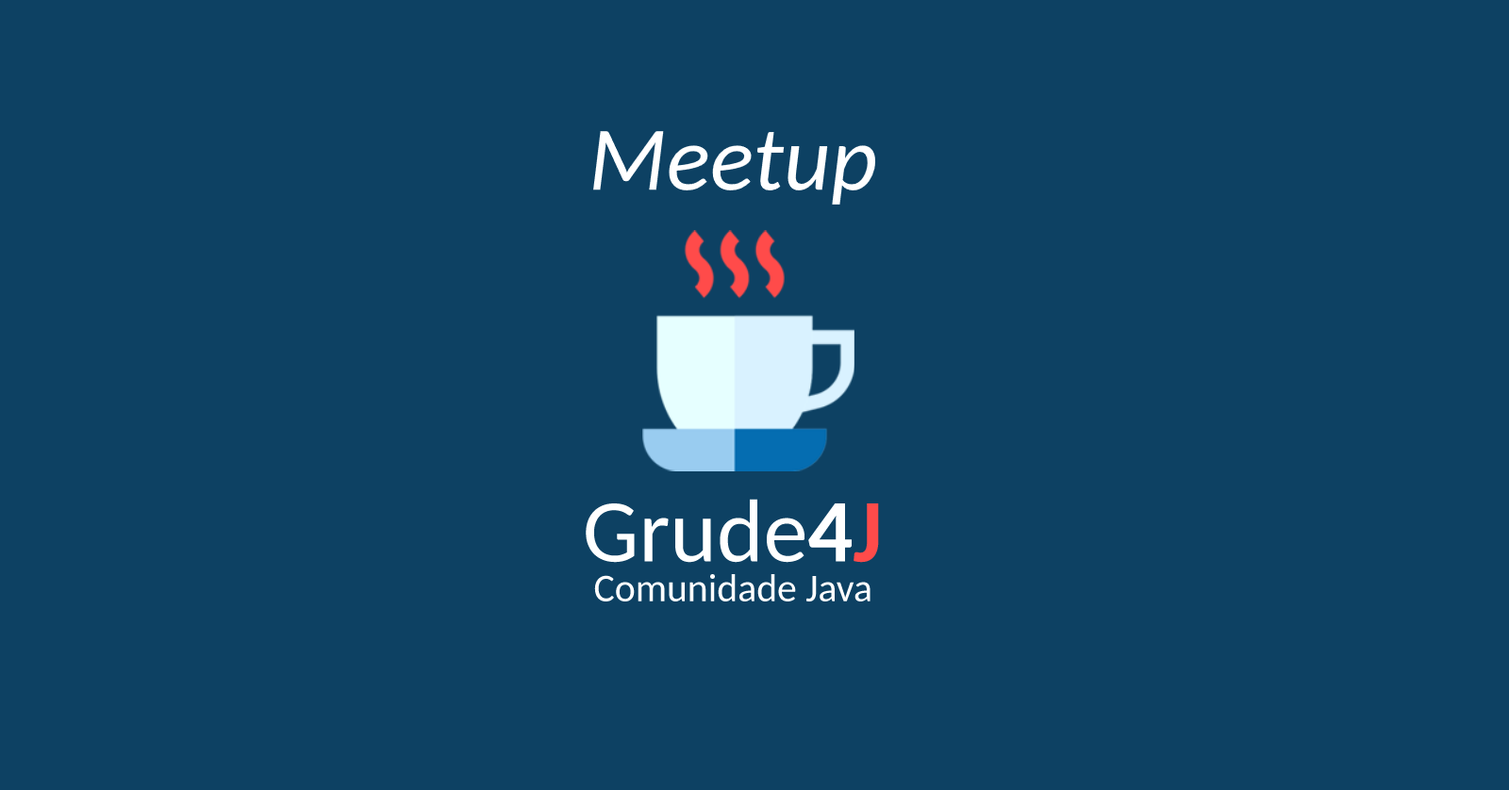
<style>
.page{position:relative;width:1509px;height:790px;background:#0d4163}
.page>*{position:absolute;margin:0}
.t1{font:91.3px "Carlito-Italic";color:#ffffff}
.t2{font:89.3px "Carlito";color:#ffffff}
.t3{font:89.3px "Carlito-Bold";color:#ffffff}
.t4{font:89.3px "Carlito-Bold";color:#ff4b4a}
.t5{font:39.3px "Carlito";color:#ffffff}
</style>
<div class="page">
<p class="t1" style="left:593px;top:131px;width:282px;height:74px">Meetup</p>
<p class="t2" style="left:586px;top:499px;width:293px;height:64px">Grude<span class="t3">4</span><span class="t4">J</span></p>
<p class="t5" style="left:594px;top:574px;width:276px;height:28px">Comunidade Java</p>
</div>
